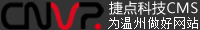
<style>
.page{position:relative;width:200px;height:30px;background:#333333}
.page>*{position:absolute;margin:0}
.t1{font:14px "MicrosoftYaHei";letter-spacing:0.025em;color:#fffefe}
.t2{font:12px "SimSun";letter-spacing:0.1em;color:#ffffff}
</style>
<div class="page">
<p class="t1" style="left:109px;top:1px;width:89px;height:14px">捷点科技CMS</p>
<p class="t2" style="left:108px;top:17px;width:90px;height:12px">为温州做好网站</p>
</div>
